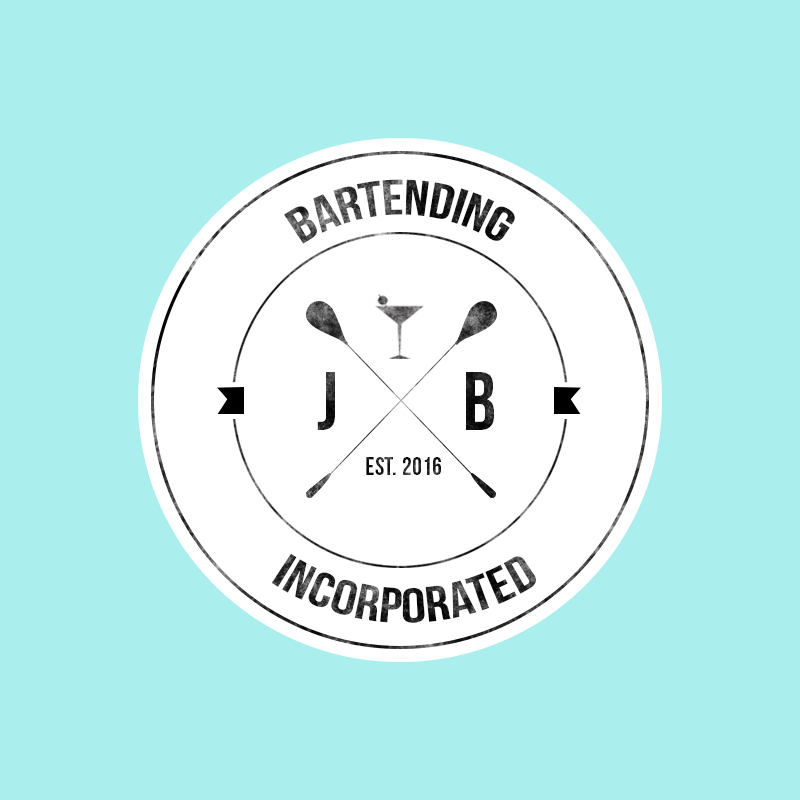
<style>
.page{position:relative;width:800px;height:800px;background:#aaeeee}
.page>*{position:absolute;margin:0}
.t1{font:50px "BebasNeue"}
.t2{font:82.3px "BebasNeue"}
.t3{font:82.3px "BebasNeue";color:#171717}
.t4{font:25.2px "BebasNeue";color:#151515}
.t5{font:25.2px "BebasNeue";color:#1f1f1f}
</style>
<div class="page">
<p class="t1" style="left:284px;top:179px;width:231px;height:65px">BARTENDING</p>
<p class="t2" style="left:317px;top:372px;width:18px;height:58px">j</p>
<p class="t3" style="left:466px;top:372px;width:28px;height:58px">B</p>
<p class="t4" style="left:366px;top:457px;width:30px;height:18px">EST.</p>
<p class="t5" style="left:403px;top:457px;width:38px;height:18px">2016</p>
<p class="t1" style="left:271px;top:553px;width:266px;height:70px">incorporated</p>
</div>
